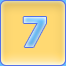
<style>
.page{position:relative;width:66px;height:66px}
.page>*{position:absolute;margin:0}
.t1{font:41px "Tahoma-Bold"}
</style>
<div class="page">
<p class="t1" style="left:23px;top:17px;width:23px;height:30px">7</p>
<p class="t1" style="left:23px;top:17px;width:23px;height:30px">7</p>
</div>
